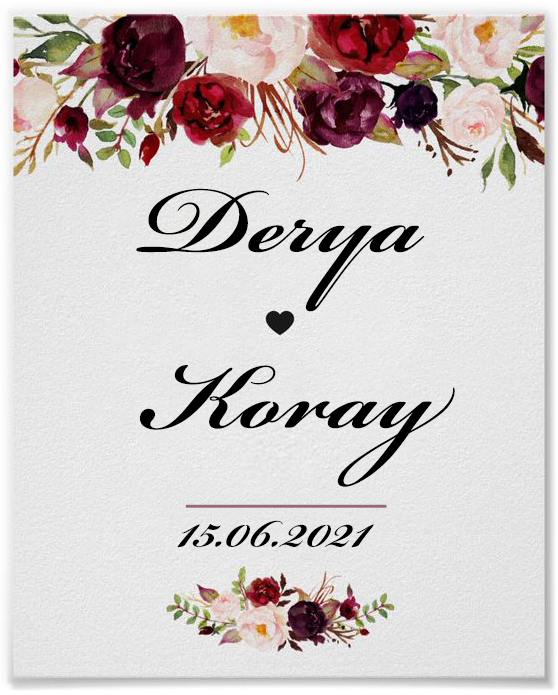
<style>
.page{position:relative;width:558px;height:695px}
.page>*{position:absolute;margin:0}
.t1{font:146.7px "BickhamScriptPro-Semibold";color:#000000}
.t2{font:80px "BickhamScriptPro-Semibold";color:#9b667a}
.t3{font:80px "BickhamScriptPro-Semibold";color:#000000}
</style>
<div class="page">
<p class="t1" style="left:136px;top:188px;width:319px;height:299px">Derya  <br>Koray</p>
<p class="t2" style="left:185px;top:504px;width:202px;height:4px">_____</p>
<p class="t3" style="left:177px;top:520px;width:197px;height:28px">15.06.2021</p>
</div>
